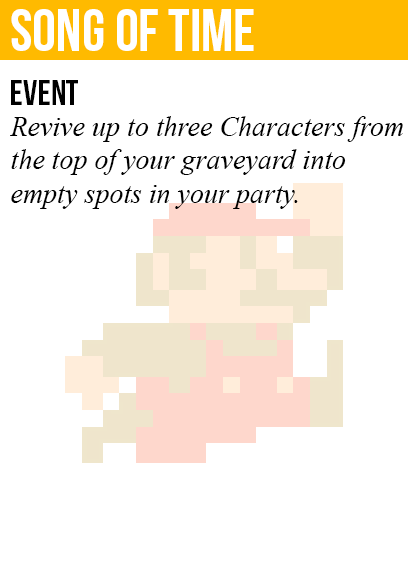
<style>
.page{position:relative;width:408px;height:585px;background:#ffffff}
.page>*{position:absolute;margin:0}
.t1{font:60px "BebasNeue";color:#ffffff}
.t2{font:36px "BebasNeue";color:#000000}
.t3{font:28px "TimesNewRomanPS-ItalicMT";color:#000000}
</style>
<div class="page">
<p class="t1" style="left:11px;top:9px;width:243px;height:42px">song of time</p>
<p class="t2" style="left:11px;top:80px;width:67px;height:25px">event</p>
<p class="t3" style="left:10px;top:116px;width:393px;height:93px">Revive up to three Characters from<br>the top of your graveyard into<br>empty spots in your party.</p>
</div>
